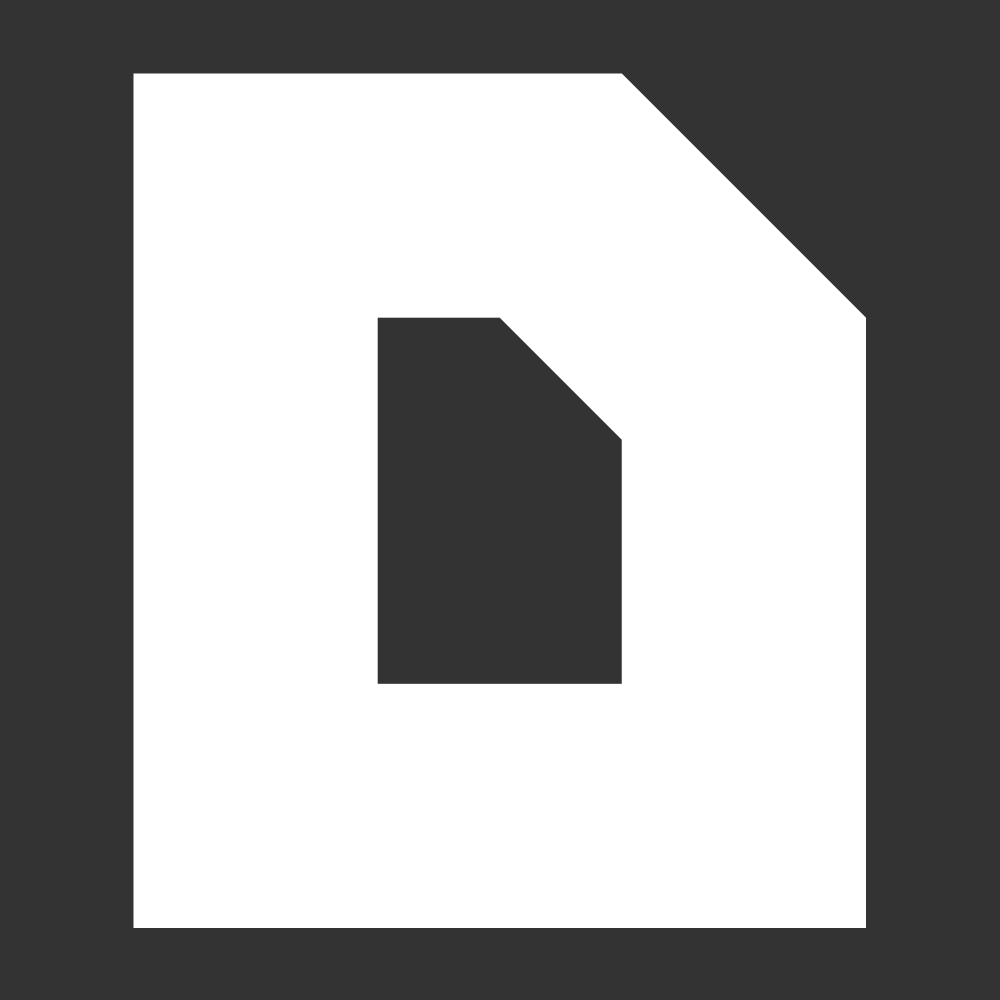
<style>
.page{position:relative;width:1000px;height:1000px;background:#333333}
.page>*{position:absolute;margin:0}
.t1{font:1250px "NeonOverdrive";letter-spacing:0.01em;color:#ffffff}
</style>
<div class="page">
<p class="t1" style="left:133px;top:73px;width:733px;height:855px">D</p>
</div>
